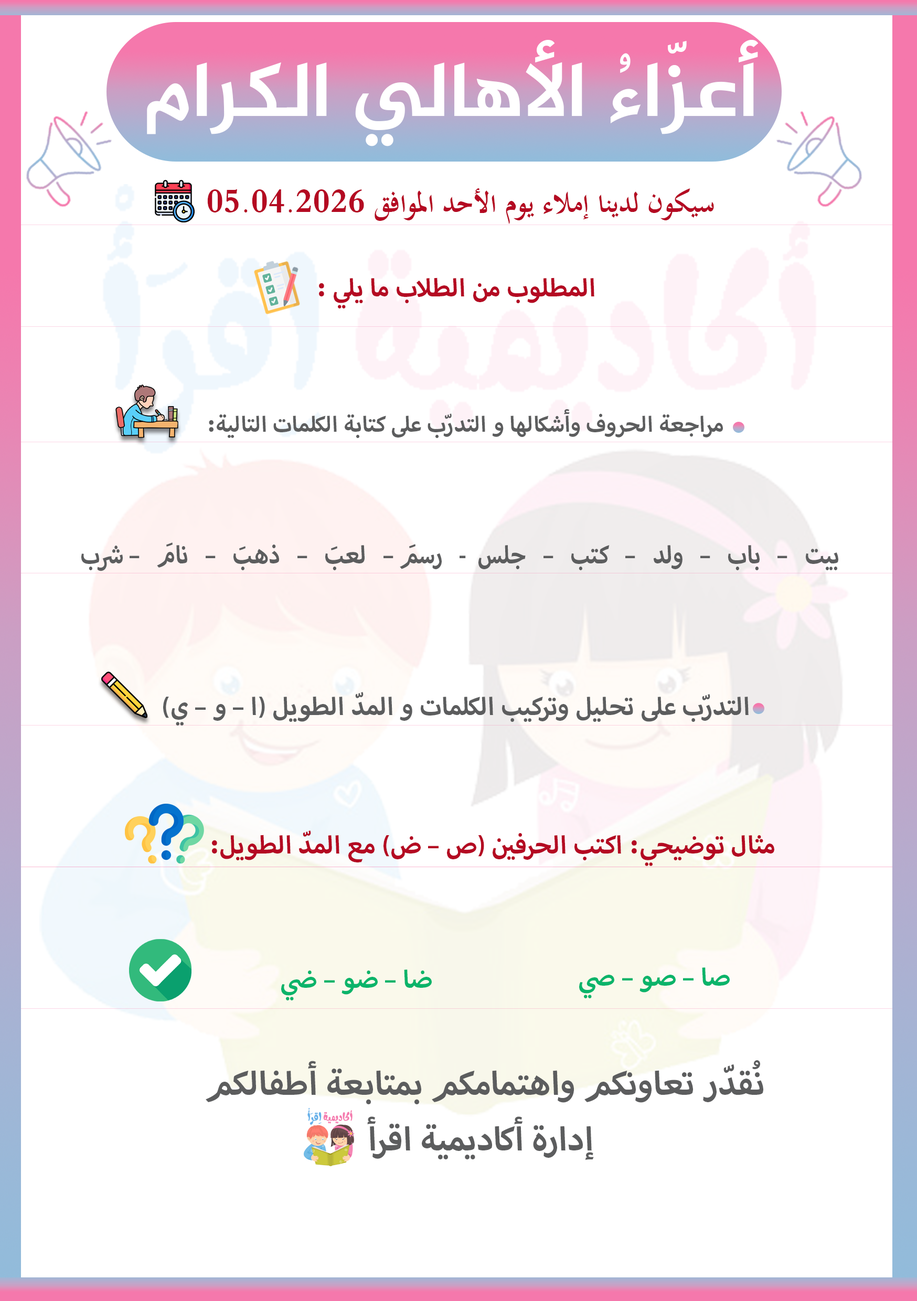
<style>
.page{position:relative;width:917px;height:1301px;background:#ffffff}
.page>*{position:absolute;margin:0}
.t1{font:78.7px "Al-Jazeera-Arabic-Bold";color:#ffffff}
.t2{font:35px "TraditionalArabic-Bold";color:#b40a22}
.t3{font:35px "MyriadArabic-Bold";color:#b40a22}
.t4{font:30.6px "MyriadArabic-Bold";color:#5c5d5e}
.t5{font:35px "MyriadArabic-Bold";color:#5c5d5e;scale:0.91 1}
.t6{font:35px "MyriadArabic-Bold";color:#5c5d5e}
.t7{font:35px "MyriadArabic-Bold";color:#0ab46a}
.t8{font:46.3px "MyriadArabic-Bold";color:#5c5d5e}
</style>
<div class="page">
<p class="t1" style="left:147px;top:40px;width:611px;height:106px">أعزّاءُ الأهالي الكرام</p>
<p class="t2" style="left:207px;top:188px;width:507px;height:36px">سيكون لدينا إملاء يوم الأحد الموافق 05.04.2026</p>
<p class="t3" style="left:319px;top:277px;width:275px;height:31px">المطلوب من الطلاب ما يلي :</p>
<p class="t4" style="left:209px;top:409px;width:514px;height:29px">مراجعة الحروف وأشكالها و التدرّب على كتابة الكلمات التالية:</p>
<p class="t5" style="left:81px;top:542px;width:757px;height:29px">بيت   –   باب   –   ولد   –   كتب   –   جلس  -   رسمَ –   لعبَ   –   ذهبَ   –   نامَ   – شرب</p>
<p class="t6" style="left:163px;top:692px;width:585px;height:33px">التدرّب على تحليل وتركيب الكلمات و المدّ الطويل (ا – و – ي)</p>
<p class="t3" style="left:212px;top:830px;width:562px;height:36px">مثال توضيحي: اكتب الحرفين (ص – ض) مع المدّ الطويل:</p>
<p class="t7" style="left:281px;top:969px;width:151px;height:31px">ضا – ضو – ضي</p>
<p class="t7" style="left:579px;top:967px;width:151px;height:31px">صا – صو – صي</p>
<p class="t8" style="left:206px;top:1060px;width:557px;height:100px;text-align:center">نُقدّر تعاونكم واهتمامكم بمتابعة أطفالكم <br>إدارة أكاديمية اقرأ</p>
</div>
